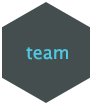
<style>
.page{position:relative;width:92px;height:105px;background:#444e4e}
.page>*{position:absolute;margin:0}
.t1{font:18px "LucidaSansUnicode";color:#4fc8e2}
</style>
<div class="page">
<p class="t1" style="left:26px;top:47px;width:42px;height:13px">team</p>
</div>
